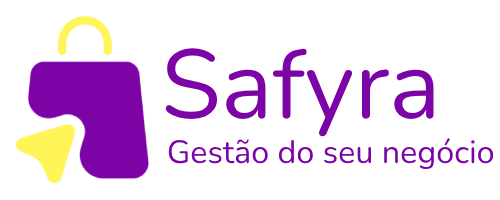
<style>
.page{position:relative;width:500px;height:200px;background:#ffffff}
.page>*{position:absolute;margin:0}
.t1{font:97.6px "Nunito-Regular";color:#7c04a6}
.t2{font:32.3px "Nunito-Regular";color:#7c04a6}
</style>
<div class="page">
<p class="t1" style="left:165px;top:48px;width:269px;height:89px">Safyra</p>
<p class="t2" style="left:168px;top:138px;width:326px;height:32px">Gestão do seu negócio</p>
</div>
